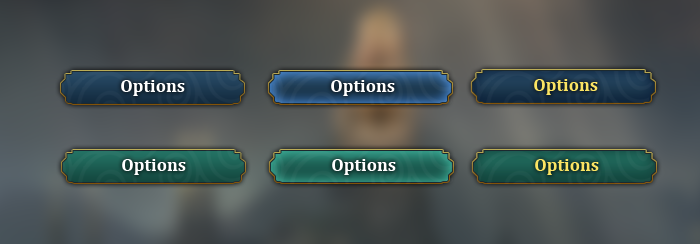
<style>
.page{position:relative;width:700px;height:244px}
.page>*{position:absolute;margin:0}
.t1{font:18px "Cambria-Bold";color:#ffffff}
.t2{font:18px "Cambria-Bold";color:#fbe463}
</style>
<div class="page">
<p class="t1" style="left:121px;top:80px;width:64px;height:16px">Options</p>
<p class="t1" style="left:331px;top:80px;width:64px;height:16px">Options</p>
<p class="t2" style="left:534px;top:79px;width:64px;height:16px">Options</p>
<p class="t1" style="left:122px;top:159px;width:64px;height:16px">Options</p>
<p class="t1" style="left:332px;top:159px;width:64px;height:16px">Options</p>
<p class="t2" style="left:535px;top:159px;width:64px;height:16px">Options</p>
</div>
